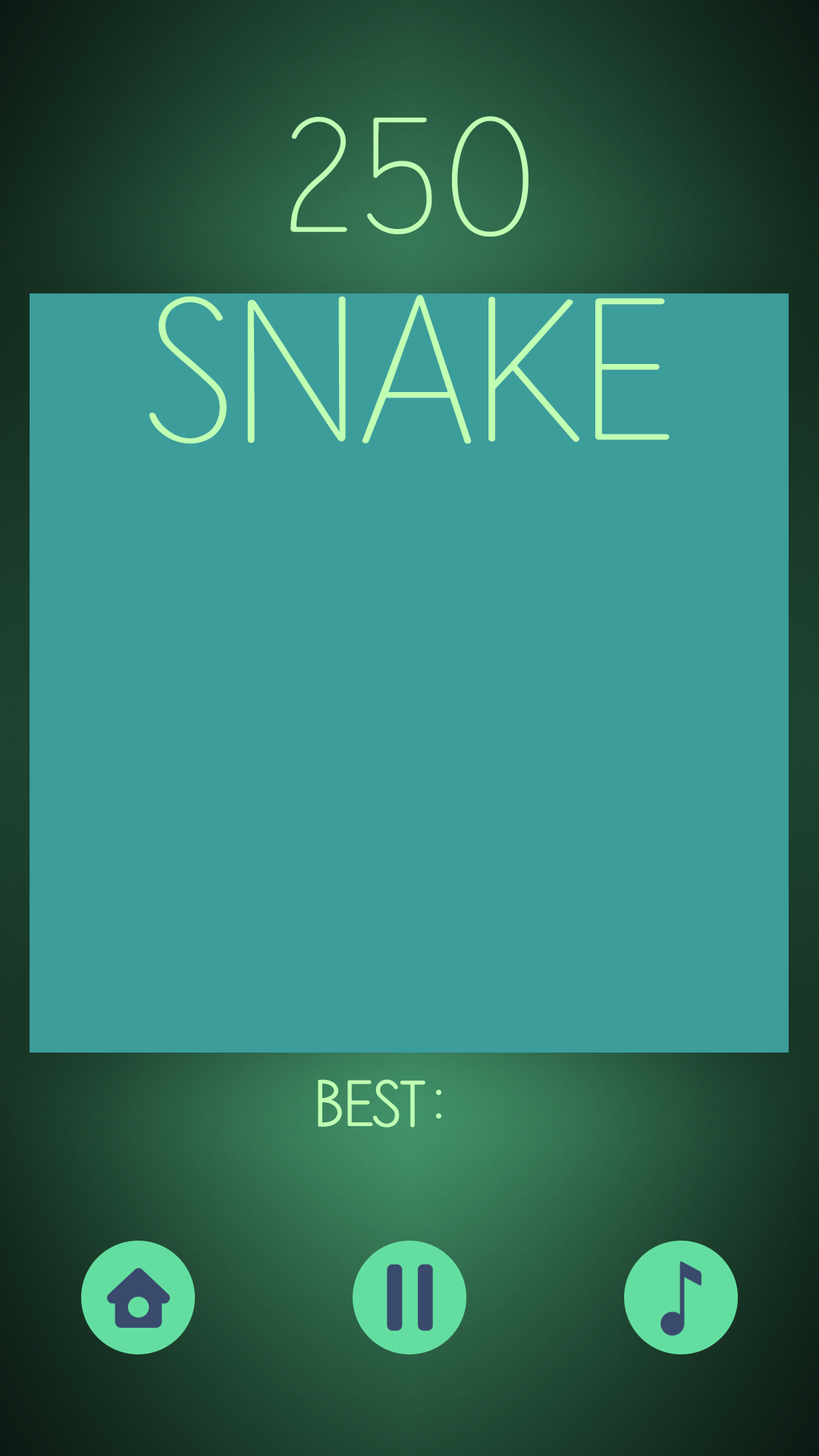
<style>
.page{position:relative;width:819px;height:1456px;background:#3c9d9b}
.page>*{position:absolute;margin:0}
.t1{font:160.3px "Jonah-Regular";color:#c0ffb3;scale:1.14 1}
.t2{font:199.8px "Jonah-Regular";color:#c0ffb3;scale:1.14 1}
</style>
<div class="page">
<p class="t1" style="left:290px;top:116px;width:239px;height:121px">250</p>
<p class="t2" style="left:149px;top:295px;width:521px;height:149px">Snake</p>
</div>
